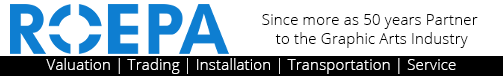
<style>
.page{position:relative;width:503px;height:76px;background:#ffffff}
.page>*{position:absolute;margin:0}
.t1{font:15.4px "OpenSans-Light";color:#000000}
.t2{font:15.4px "OpenSans-Light";color:#ffffff}
</style>
<div class="page">
<p class="t1" style="left:262px;top:14px;width:216px;height:34px;text-align:center">Since more as 50 years Partner <br>to the Graphic Arts Industry</p>
<p class="t2" style="left:46px;top:58px;width:410px;height:16px">Valuation | Trading | Installation | Transportation | Service</p>
</div>
